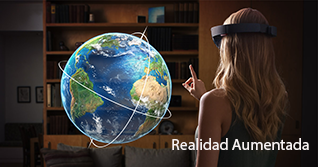
<style>
.page{position:relative;width:318px;height:167px}
.page>*{position:absolute;margin:0}
.t1{font:15.9px "MyriadPro-Regular";color:#f8f3f3}
</style>
<div class="page">
<p class="t1" style="left:172px;top:138px;width:137px;height:12px">Realidad Aumentada</p>
</div>
